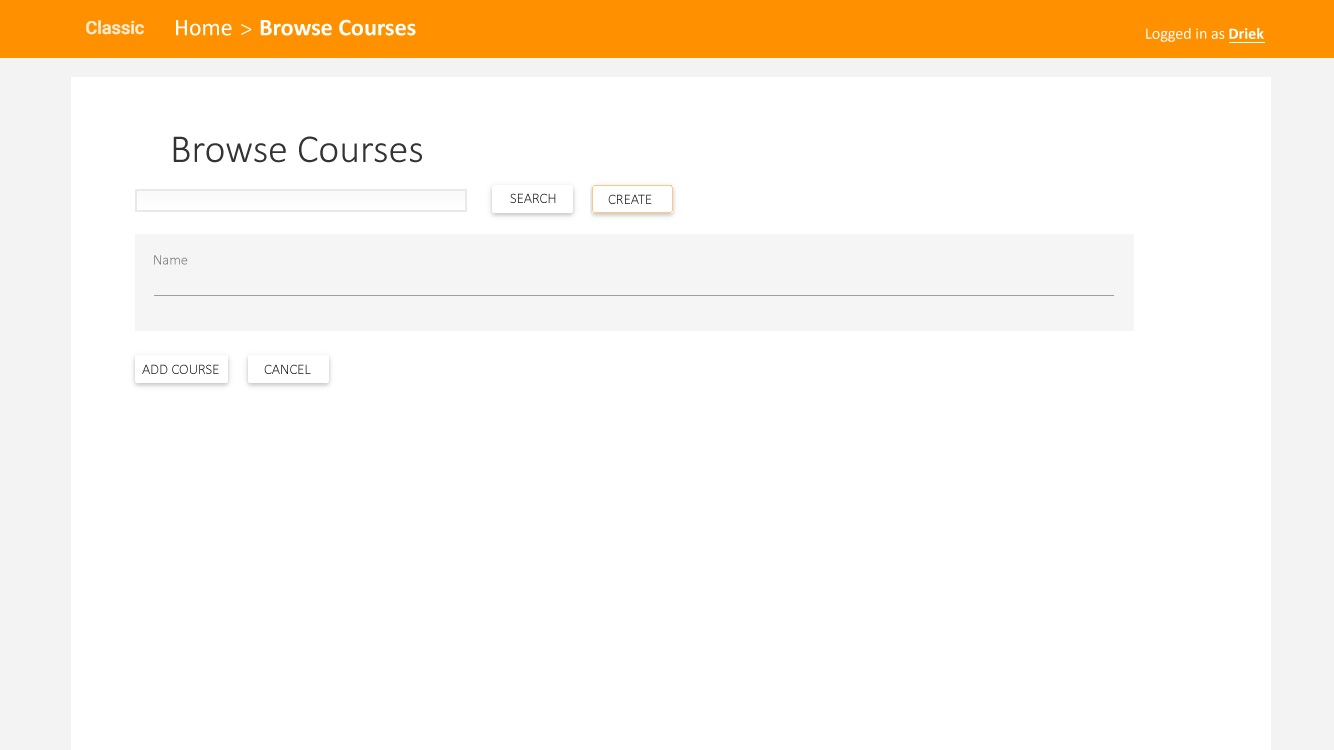
<style>
.page{position:relative;width:1334px;height:750px;background:#ffffff}
.page>*{position:absolute;margin:0}
.t1{font:24px "Calibri";color:#ffffff}
.t2{font:24px "Calibri-Light";color:#ffffff}
.t3{font:24px "Calibri-Bold";color:#ffffff}
.t4{font:16px "Calibri";color:#ffffff}
.t5{font:16px "Calibri-Bold";color:#ffffff}
.t6{font:40px "Calibri-Light";color:#333333}
.t7{font:14.7px "Calibri-Light";color:#1b1b1b}
.t8{font:14.7px "Calibri-Light"}
.t9{font:14.7px "Calibri-Light";color:#777777}
</style>
<div class="page">
<p class="t1" style="left:176px;top:20px;width:56px;height:16px">Home</p>
<p class="t2" style="left:241px;top:24px;width:11px;height:11px">&gt;</p>
<p class="t3" style="left:260px;top:19px;width:156px;height:17px">Browse Courses</p>
<p class="t4" style="left:1146px;top:28px;width:118px;height:14px">Logged in as <span class="t5">Driek</span></p>
<p class="t6" style="left:173px;top:136px;width:249px;height:27px">Browse Courses</p>
<p class="t7" style="left:510px;top:193px;width:46px;height:10px">SEARCH</p>
<p class="t8" style="left:608px;top:194px;width:44px;height:10px">CREATE</p>
<p class="t9" style="left:154px;top:255px;width:34px;height:10px">Name</p>
<p class="t7" style="left:142px;top:364px;width:77px;height:10px">ADD COURSE</p>
<p class="t7" style="left:264px;top:364px;width:47px;height:10px">CANCEL</p>
</div>
